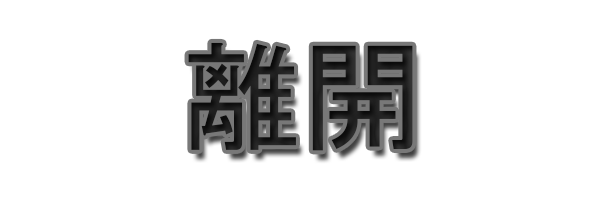
<style>
.page{position:relative;width:600px;height:200px;background:#ffffff}
.page>*{position:absolute;margin:0}
.t1{font:120px "MS-Gothic";color:#1c1c1c}
</style>
<div class="page">
<p class="t1" style="left:188px;top:42px;width:225px;height:109px">離開</p>
</div>
